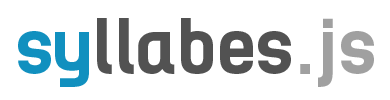
<style>
.page{position:relative;width:390px;height:100px;background:#ffffff}
.page>*{position:absolute;margin:0}
.t1{font:72px "Kelson-Bold";color:#525252}
.t2{font:72px "Kelson-Bold";color:#1190bf}
.t3{font:72px "Kelson-Bold";color:#a0a0a0}
</style>
<div class="page">
<p class="t1" style="left:18px;top:18px;width:356px;height:69px"><span class="t2">sy</span>llabes<span class="t3">.js</span></p>
</div>
